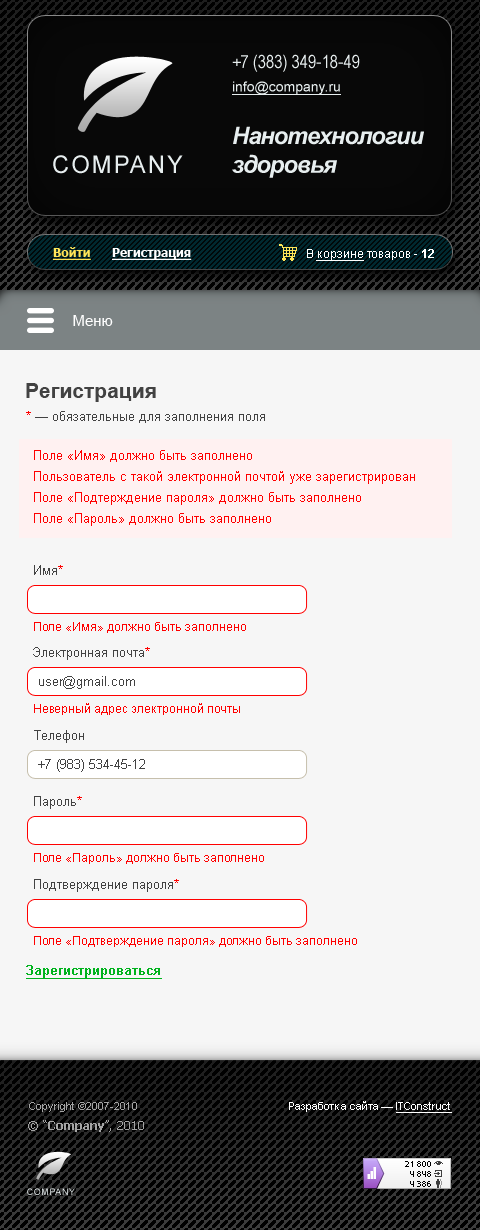
<style>
.page{position:relative;width:480px;height:1230px;background:#f6f6f6}
.page>*{position:absolute;margin:0}
.t1{font:21px "Arial-BoldMT";color:#424242}
.t2{font:13px "ArialMT";color:#424242}
.t3{font:13px "ArialMT";color:#ff0000}
.t4{font:12px "ArialMT";color:#ff0000}
.t5{font:13px "Arial-BoldMT";color:#00b31d;text-decoration:underline}
</style>
<div class="page">
<p class="t1" style="left:26px;top:383px;width:130px;height:19px">Регистрация</p>
<p class="t2" style="left:26px;top:411px;width:239px;height:12px"><span class="t3">*</span> — обязательные для заполнения поля</p>
<p class="t3" style="left:34px;top:450px;width:218px;height:12px">Поле «Имя» должно быть заполнено</p>
<p class="t3" style="left:34px;top:471px;width:381px;height:13px">Пользователь с такой электронной почтой уже зарегистрирован</p>
<p class="t3" style="left:34px;top:492px;width:327px;height:13px">Поле «Подтерждение пароля» должно быть заполнено</p>
<p class="t3" style="left:34px;top:513px;width:237px;height:13px">Поле «Пароль» должно быть заполнено</p>
<p class="t2" style="left:34px;top:565px;width:29px;height:10px">Имя<span class="t3">*</span></p>
<p class="t4" style="left:34px;top:622px;width:212px;height:11px">Поле «Имя» должно быть заполнено</p>
<p class="t2" style="left:33px;top:647px;width:117px;height:13px">Электронная почта<span class="t3">*</span></p>
<p class="t2" style="left:39px;top:676px;width:96px;height:13px">user@gmail.com</p>
<p class="t4" style="left:34px;top:703px;width:206px;height:12px">Неверный адрес электронной почты</p>
<p class="t2" style="left:34px;top:730px;width:50px;height:13px">Телефон</p>
<p class="t2" style="left:38px;top:759px;width:107px;height:13px">+7 (983) 534-45-12</p>
<p class="t2" style="left:34px;top:796px;width:48px;height:13px">Пароль<span class="t3">*</span></p>
<p class="t4" style="left:34px;top:853px;width:230px;height:11px">Поле «Пароль» должно быть заполнено</p>
<p class="t2" style="left:34px;top:879px;width:145px;height:13px">Подтверждение пароля<span class="t3">*</span></p>
<p class="t4" style="left:34px;top:936px;width:323px;height:11px">Поле «Подтверждение пароля» должно быть заполнено</p>
<p class="t5" style="left:26px;top:965px;width:136px;height:14px">Зарегистрироваться</p>
</div>
